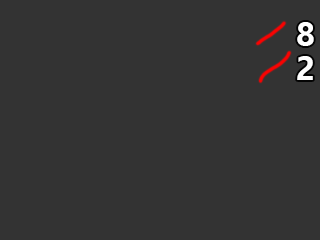
<style>
.page{position:relative;width:320px;height:240px;background:#333333}
.page>*{position:absolute;margin:0}
.t1{font:33px "SegoeUI-Bold";color:#ffffff}
</style>
<div class="page">
<p class="t1" style="left:297px;top:22px;width:17px;height:24px">8</p>
<p class="t1" style="left:297px;top:56px;width:16px;height:24px">2</p>
</div>
